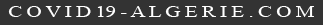
<style>
.page{position:relative;width:323px;height:25px;background:#333333}
.page>*{position:absolute;margin:0}
.t1{font:14.6px "TimesNewRomanPSMT";letter-spacing:-0.025em;color:#ffffff;scale:1.45 1}
</style>
<div class="page">
<p class="t1" style="left:8px;top:6px;width:306px;height:11px">C O V I D 19 - A L G E R I E . C O M</p>
</div>
